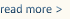
<style>
.page{position:relative;width:70px;height:19px;background:#fdfaf2}
.page>*{position:absolute;margin:0}
.t1{font:13px "Calibri";scale:0.94 1}
</style>
<div class="page">
<p class="t1" style="left:1px;top:4px;width:51px;height:9px">read more</p>
<p class="t1" style="left:56px;top:6px;width:6px;height:7px">&gt;</p>
</div>
